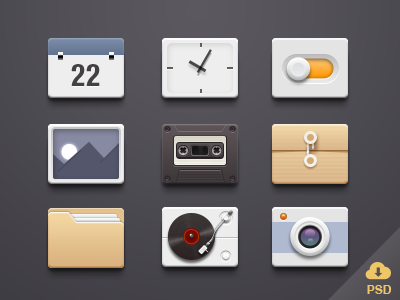
<style>
.page{position:relative;width:400px;height:300px}
.page>*{position:absolute;margin:0}
.t1{font:30px "HelveticaNeueLTPro-BdCn";letter-spacing:0.01em;color:#434141}
.t2{font:12px "Helvetica_cyr-Bold";color:#eec667}
</style>
<div class="page">
<p class="t1" style="left:71px;top:64px;width:29px;height:22px">22</p>
<p class="t2" style="left:367px;top:285px;width:25px;height:9px">PSD</p>
</div>
